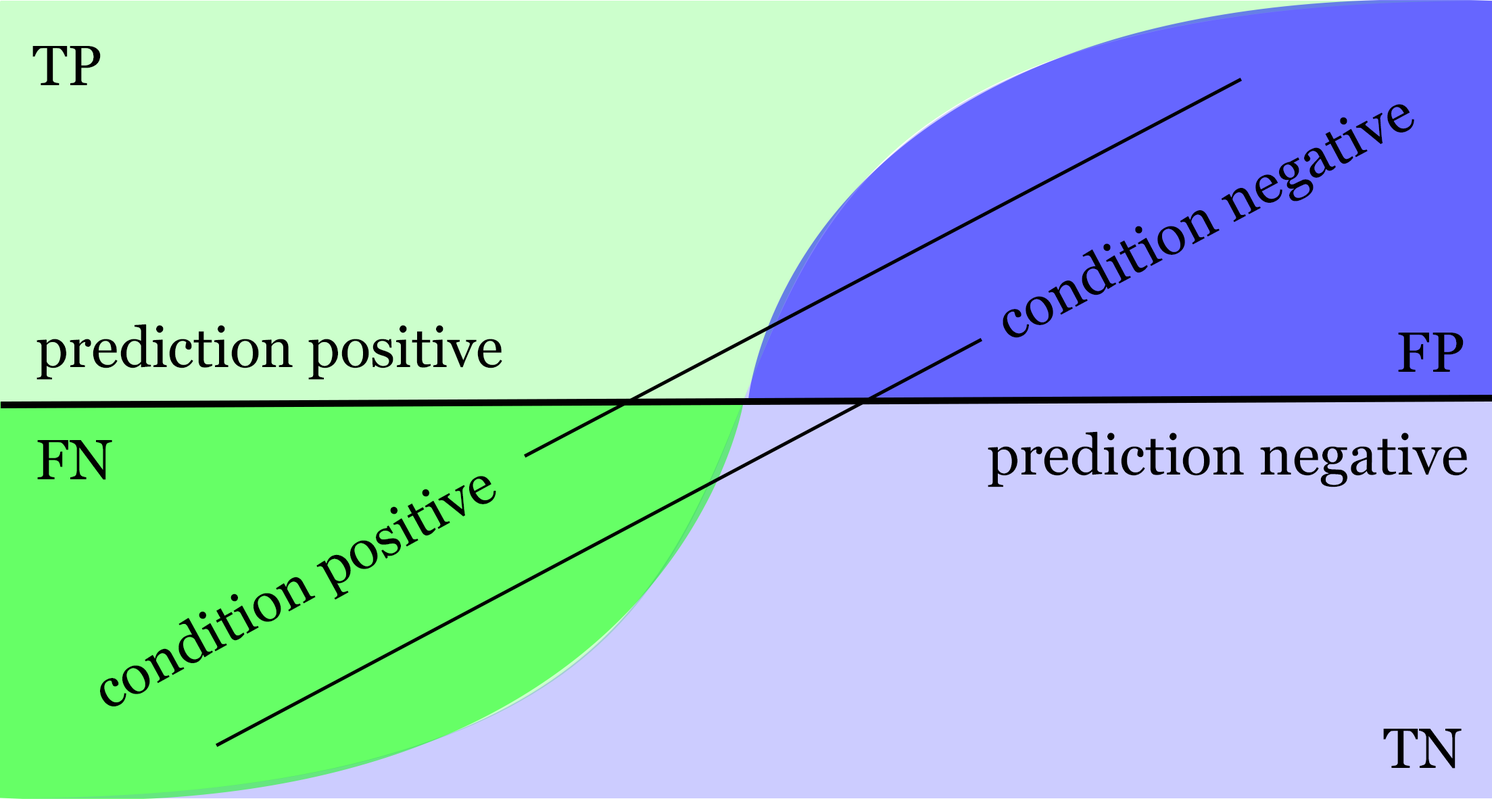
<style>
.page{position:relative;width:1492px;height:799px;background:#ccffcc}
.page>*{position:absolute;margin:0}
.t1{font:56.7px "Georgia";color:#000000}
.t2{font:56.1px "Georgia";color:#000000}
</style>
<div class="page">
<p class="t1" style="left:32px;top:46px;width:69px;height:39px">TP</p>
<p class="t2" style="left:1003px;top:104px;width:411px;height:234px;rotate:-28deg">condition negative</p>
<p class="t1" style="left:37px;top:324px;width:465px;height:56px">prediction positive</p>
<p class="t1" style="left:1398px;top:333px;width:66px;height:39px">FP</p>
<p class="t1" style="left:988px;top:431px;width:480px;height:56px">prediction negative</p>
<p class="t1" style="left:37px;top:440px;width:75px;height:40px">FN</p>
<p class="t2" style="left:100px;top:476px;width:396px;height:231px;rotate:-29deg">condition positive</p>
<p class="t1" style="left:1383px;top:729px;width:79px;height:40px">TN</p>
</div>
